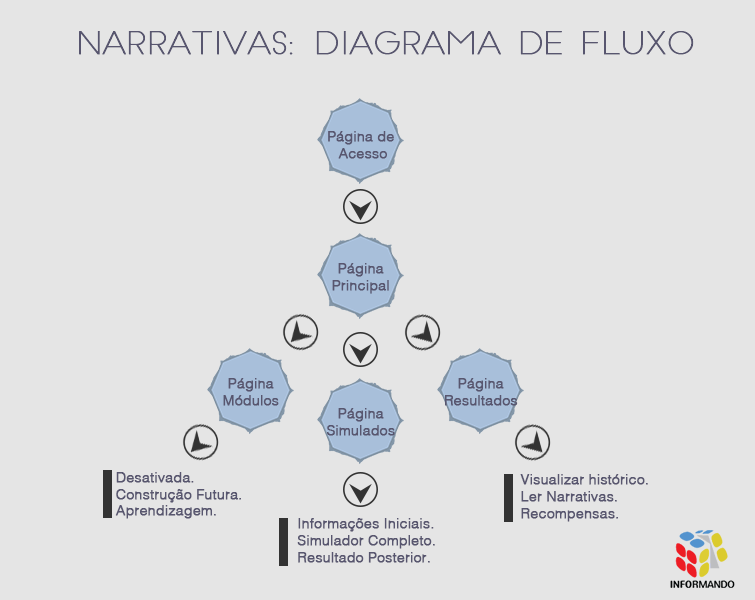
<style>
.page{position:relative;width:755px;height:600px;background:#e5e5e5}
.page>*{position:absolute;margin:0}
.t1{font:31px "SlimJoe";color:#58566f;font-weight:bold}
.t2{font:14px "HelvLight-Normal";color:#58566f;font-weight:bold}
</style>
<div class="page">
<p class="t1" style="left:79px;top:31px;width:615px;height:24px">Narrativas: Diagrama de fluxo</p>
<p class="t2" style="left:328px;top:131px;width:66px;height:28px;text-align:center">Página de<br> Acesso</p>
<p class="t2" style="left:332px;top:263px;width:57px;height:31px;text-align:center">Página<br>Principal</p>
<p class="t2" style="left:223px;top:378px;width:56px;height:28px;text-align:center">Página<br>Módulos</p>
<p class="t2" style="left:445px;top:378px;width:73px;height:28px;text-align:center">Página<br>Resultados</p>
<p class="t2" style="left:327px;top:408px;width:68px;height:28px;text-align:center">Página<br>Simulados</p>
<p class="t2" style="left:115px;top:472px;width:126px;height:47px">Desativada.<br>Construção Futura.<br>Aprendizagem.</p>
<p class="t2" style="left:520px;top:474px;width:128px;height:48px">Visualizar histórico.<br>Ler Narrativas.<br>Recompensas.</p>
<p class="t2" style="left:297px;top:518px;width:138px;height:45px">Informações Iniciais.<br>Simulador Completo.<br>Resultado Posterior.</p>
</div>
